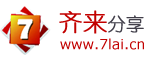
<style>
.page{position:relative;width:150px;height:60px;background:#ffffff}
.page>*{position:absolute;margin:0}
.t1{font:24px "YouYuan";color:#c20100;font-weight:bold}
.t2{font:18px "YouYuan";color:#423f4a;font-weight:bold}
.t3{font:14px "MSReferenceSansSerif";color:#c20100}
</style>
<div class="page">
<p class="t1" style="left:59px;top:10px;width:85px;height:24px">齐来<span class="t2">分享</span></p>
<p class="t3" style="left:60px;top:38px;width:84px;height:12px">www.7lai.cn</p>
</div>
